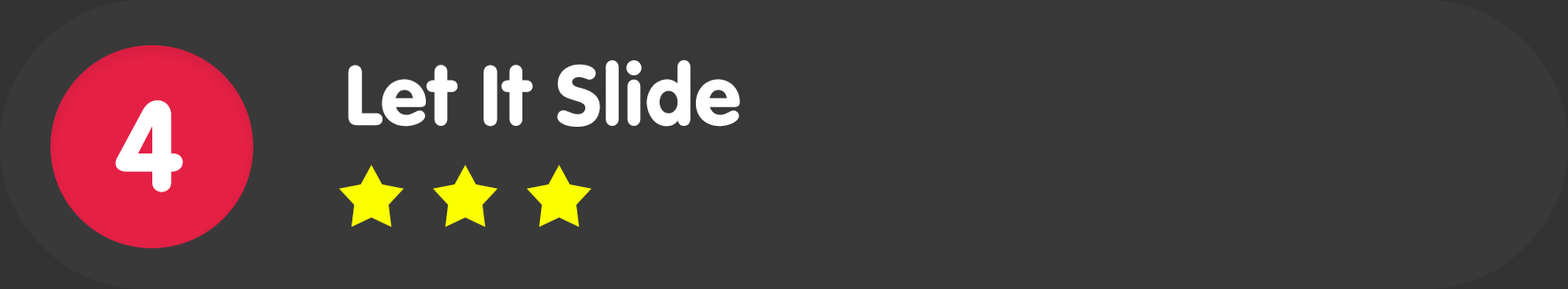
<style>
.page{position:relative;width:1568px;height:289px;background:#393939}
.page>*{position:absolute;margin:0}
.t1{font:88.5px "VAGRundschriftD";color:#ffffff}
.t2{font:132.8px "VAGRundschriftD";color:#ffffff}
</style>
<div class="page">
<p class="t1" style="left:348px;top:59px;width:392px;height:68px">Let It Slide</p>
<p class="t2" style="left:115px;top:100px;width:68px;height:92px">4</p>
</div>
